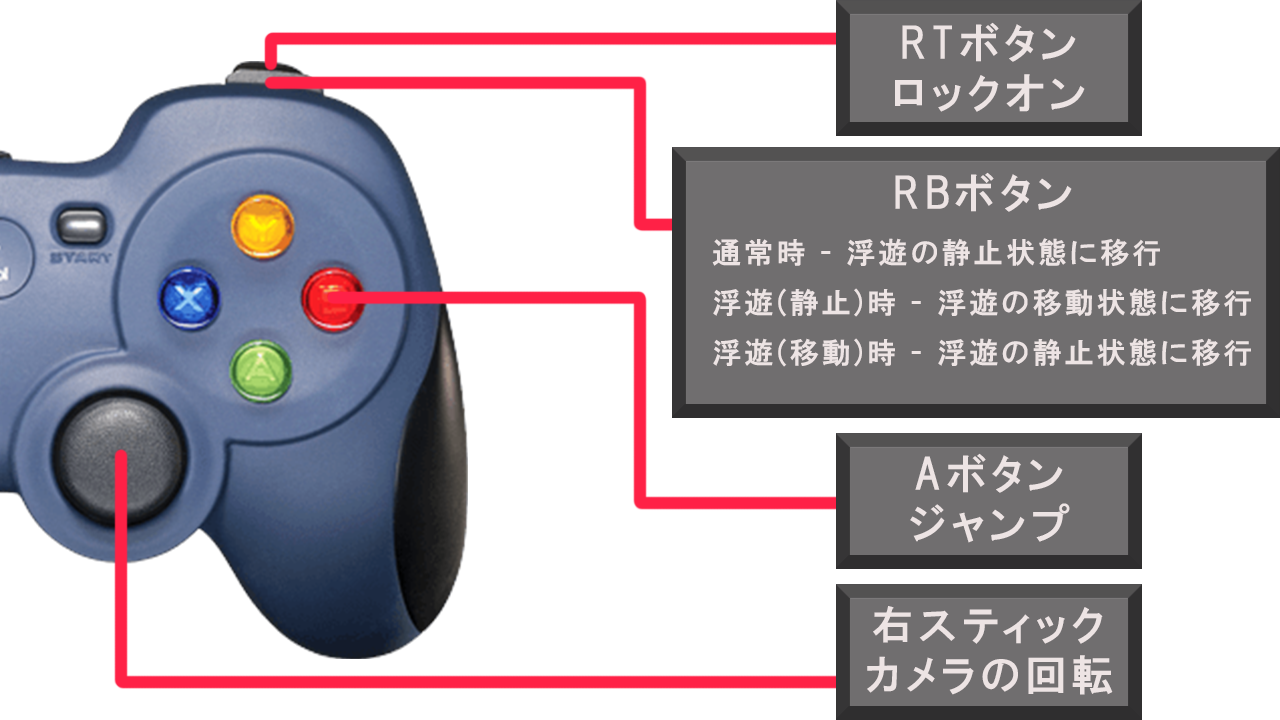
<style>
.page{position:relative;width:1280px;height:720px;background:#ffffff}
.page>*{position:absolute;margin:0}
.t1{font:41.7px/50px "HGPGothicE";letter-spacing:0.1em;color:#ede4e4}
.t2{font:41.7px "HGPGothicE";letter-spacing:0.1em;color:#ede4e4}
.t3{font:29.2px/50px "HGPGothicE";letter-spacing:0.1em;color:#ede4e4}
</style>
<div class="page">
<p class="t1" style="left:895px;top:22px;width:190px;height:90px;text-align:center">RTボタン<br>ロックオン</p>
<p class="t2" style="left:895px;top:172px;width:177px;height:40px">RBボタン</p>
<p class="t3" style="left:712px;top:238px;width:539px;height:129px">通常時 - 浮遊の静止状態に移行<br>浮遊(静止)時 - 浮遊の移動状態に移行<br>浮遊(移動)時 - 浮遊の静止状態に移行</p>
<p class="t1" style="left:910px;top:453px;width:160px;height:90px;text-align:center">Aボタン<br>ジャンプ</p>
<p class="t1" style="left:867px;top:606px;width:246px;height:89px;text-align:center">右スティック<br>カメラの回転</p>
</div>
